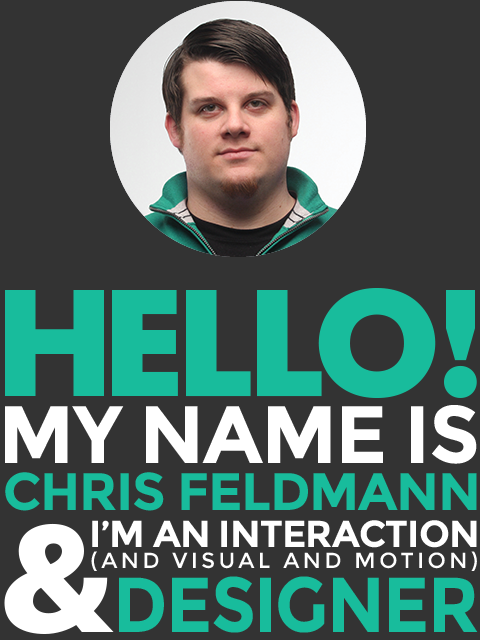
<style>
.page{position:relative;width:480px;height:640px;background:#333333}
.page>*{position:absolute;margin:0}
.t1{font:151.3px "FuturaTodayT02-Bold";letter-spacing:-0.045em;color:#18bc9c}
.t2{font:151.3px "FuturaTodayT02-Bold";letter-spacing:-0.065em;color:#18bc9c}
.t3{font:81.2px "Montserrat-Bold";letter-spacing:-0.025em;color:#ffffff}
.t4{font:52.8px "Montserrat-Bold";letter-spacing:-0.025em;color:#18bc9c}
.t5{font:37.6px "Montserrat-Bold";letter-spacing:-0.025em;color:#ffffff}
.t6{font:150.4px "FuturaTodayT02-Bold";letter-spacing:-0.065em;color:#ffffff}
.t7{font:21.7px "Montserrat-Regular";letter-spacing:0.16em;color:#ffffff}
.t8{font:77.8px "Montserrat-Bold";letter-spacing:-0.025em;color:#18bc9c;scale:0.91 1}
</style>
<div class="page">
<p class="t1" style="left:5px;top:288px;width:472px;height:110px"><span class="t2">H</span>ELLO!</p>
<p class="t3" style="left:5px;top:405px;width:472px;height:59px">MY NAME IS</p>
<p class="t4" style="left:5px;top:472px;width:472px;height:39px">CHRIS FELDMANN</p>
<p class="t5" style="left:92px;top:520px;width:385px;height:28px">I’M AN INTERACTION</p>
<p class="t6" style="left:4px;top:523px;width:110px;height:111px">&amp;</p>
<p class="t7" style="left:91px;top:551px;width:386px;height:20px">(AND VISUAL AND MOTION)</p>
<p class="t8" style="left:119px;top:576px;width:359px;height:57px">DESIGNER</p>
</div>
